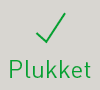
<style>
.page{position:relative;width:100px;height:90px;background:#d8d6d1}
.page>*{position:absolute;margin:0}
.t1{font:24.5px "DIN-Regular";color:#03a234}
</style>
<div class="page">
<p class="t1" style="left:10px;top:60px;width:81px;height:18px">Plukket</p>
</div>
